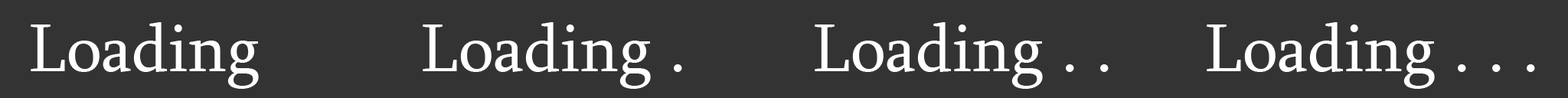
<style>
.page{position:relative;width:1568px;height:98px;background:#333333}
.page>*{position:absolute;margin:0}
.t1{font:68.9px "Sylfaen";color:#ffffff}
</style>
<div class="page">
<p class="t1" style="left:31px;top:22px;width:228px;height:67px">Loading</p>
<p class="t1" style="left:423px;top:22px;width:259px;height:67px">Loading .</p>
<p class="t1" style="left:815px;top:22px;width:294px;height:67px">Loading . .</p>
<p class="t1" style="left:1207px;top:22px;width:328px;height:67px">Loading . . .</p>
</div>
